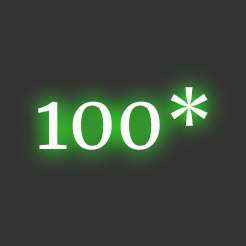
<style>
.page{position:relative;width:246px;height:246px;background:#333333}
.page>*{position:absolute;margin:0}
.t1{font:75px "Merriweather-Regular";color:#ffffff}
</style>
<div class="page">
<p class="t1" style="left:38px;top:87px;width:170px;height:63px">100*</p>
</div>
